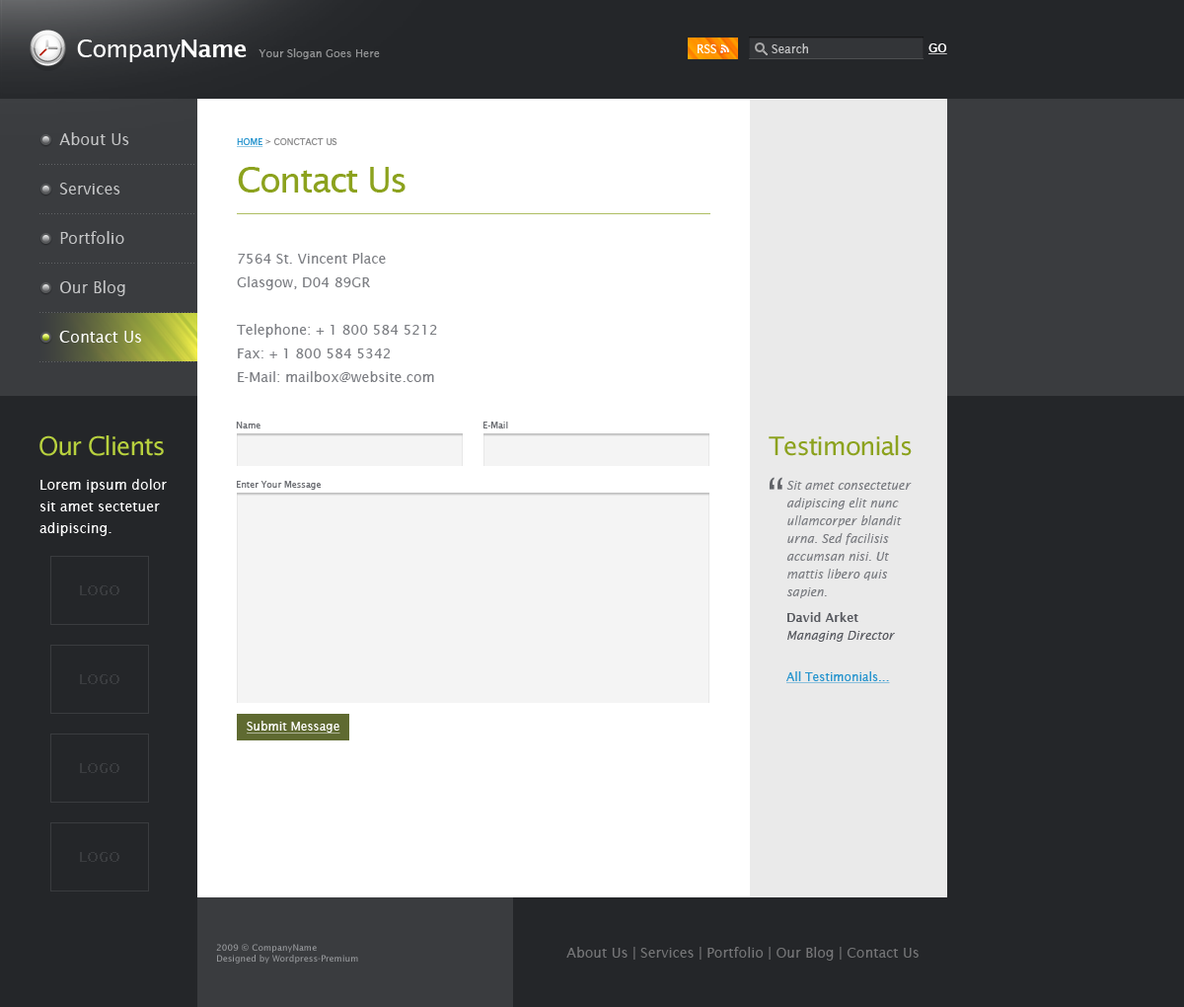
<style>
.page{position:relative;width:1184px;height:1007px;background:#242629}
.page>*{position:absolute;margin:0}
.t1{font:23.7px "LucidaSans";letter-spacing:-0.025em;color:#ffffff}
.t2{font:23.7px "LucidaSans-Demi";letter-spacing:-0.025em;color:#ffffff}
.t3{font:10.9px "LucidaSans";color:#929395}
.t4{font:11.8px "LucidaSans";color:#ffffff}
.t5{font:11.8px "LucidaSans";color:#c2c3c4}
.t6{font:15.8px/49.4px "LucidaSans";color:#c4c5c6}
.t7{font:8.9px "LucidaSans";color:#8d8d8e;text-transform:uppercase}
.t8{font:8.9px "LucidaSans";color:#2895ce;text-transform:uppercase;text-decoration:underline}
.t9{font:35.5px "LucidaSans";letter-spacing:-0.05em;color:#8ca21e}
.t10{font:13.8px/23.7px "LucidaSans";color:#7b7d82}
.t11{font:15.8px "LucidaSans";color:#fefefe}
.t12{font:8.9px "LucidaSans";color:#6b6d72}
.t13{font:25.7px "LucidaSans";letter-spacing:-0.05em;color:#b8d13e}
.t14{font:25.7px "LucidaSans";letter-spacing:-0.05em;color:#8ca21e}
.t15{font:13.8px/21.7px "LucidaSans";color:#ffffff}
.t16{font:11.8px/17.8px "LucidaSans-Italic";color:#7b7d82}
.t17{font:11.8px/23.7px "LucidaSans";color:#2895ce;text-decoration:underline}
.t18{font:11.8px/17.8px "LucidaSans-Demi";color:#585a60}
.t19{font:11.8px/17.8px "LucidaSans-Italic";color:#585a60}
.t20{font:11.8px "LucidaSans";color:#ffffff;text-decoration:underline}
.t21{font:8.9px "LucidaSans";color:#979798}
.t22{font:13.8px "LucidaSans";color:#757577}
</style>
<div class="page">
<p class="t1" style="left:77px;top:39px;width:170px;height:23px">Company<span class="t2">Name</span></p>
<p class="t3" style="left:259px;top:48px;width:121px;height:11px">Your Slogan Goes Here</p>
<p class="t4" style="left:698px;top:44px;width:19px;height:9px">RSS</p>
<p class="t5" style="left:772px;top:43px;width:36px;height:10px">Search</p>
<p class="t6" style="left:59px;top:132px;width:70px;height:164px">About Us<br>Services<br>Portfolio<br>Our Blog</p>
<p class="t7" style="left:237px;top:138px;width:101px;height:9px"><span class="t8">Home</span> &gt; Conctact Us</p>
<p class="t9" style="left:238px;top:167px;width:168px;height:25px">Contact Us</p>
<p class="t10" style="left:237px;top:253px;width:200px;height:129px">7564 St. Vincent Place<br>Glasgow, D04 89GR<br><br>Telephone: + 1 800 584 5212<br>Fax: + 1 800 584 5342<br>E-Mail: mailbox@website.com</p>
<p class="t11" style="left:59px;top:331px;width:82px;height:11px">Contact Us</p>
<p class="t12" style="left:236px;top:421px;width:25px;height:7px">Name</p>
<p class="t12" style="left:484px;top:421px;width:24px;height:7px">E-Mail</p>
<p class="t13" style="left:39px;top:435px;width:125px;height:21px">Our Clients</p>
<p class="t14" style="left:769px;top:435px;width:143px;height:21px">Testimonials</p>
<p class="t15" style="left:39px;top:479px;width:128px;height:57px">Lorem ipsum dolor sit amet sectetuer adipiscing.</p>
<p class="t12" style="left:237px;top:481px;width:84px;height:9px">Enter Your Message</p>
<p class="t16" style="left:787px;top:481px;width:125px;height:117px">Sit amet consectetuer adipiscing elit nunc ullamcorper blandit urna. Sed facilisis accumsan nisi. Ut mattis libero quis sapien.</p>
<p class="t17" style="left:787px;top:612px;width:108px;height:71px"><span class="t18">David Arket<br></span><span class="t19">Managing Director<br><br></span>All Testimonials...</p>
<p class="t20" style="left:247px;top:721px;width:94px;height:12px">Submit Message</p>
<p class="t21" style="left:216px;top:944px;width:142px;height:19px">2009 © CompanyName<br>Designed by Wordpress-Premium</p>
<p class="t22" style="left:567px;top:947px;width:352px;height:13px">About Us | Services | Portfolio | Our Blog | Contact Us</p>
</div>
